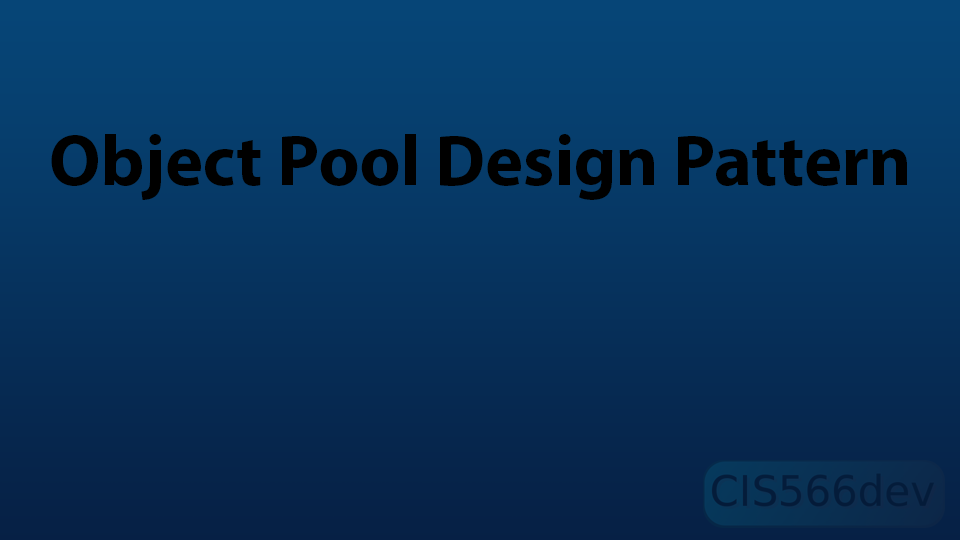
<style>
.page{position:relative;width:960px;height:540px}
.page>*{position:absolute;margin:0}
.t1{font:72px "MyriadPro-Bold";color:#000000}
</style>
<div class="page">
<p class="t1" style="left:51px;top:134px;width:856px;height:66px">Object Pool Design Pattern</p>
</div>
